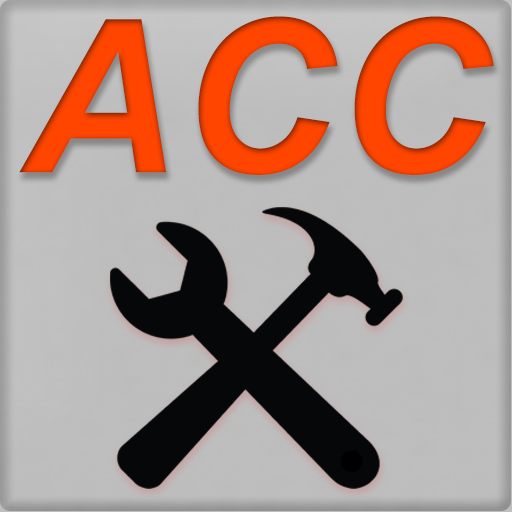
<style>
.page{position:relative;width:512px;height:512px;background:#bdbdbd}
.page>*{position:absolute;margin:0}
.t1{font:213.3px "Arial-BoldItalicMT";letter-spacing:0.01em;color:#ff4500}
</style>
<div class="page">
<p class="t1" style="left:19px;top:16px;width:475px;height:159px">ACC</p>
</div>
